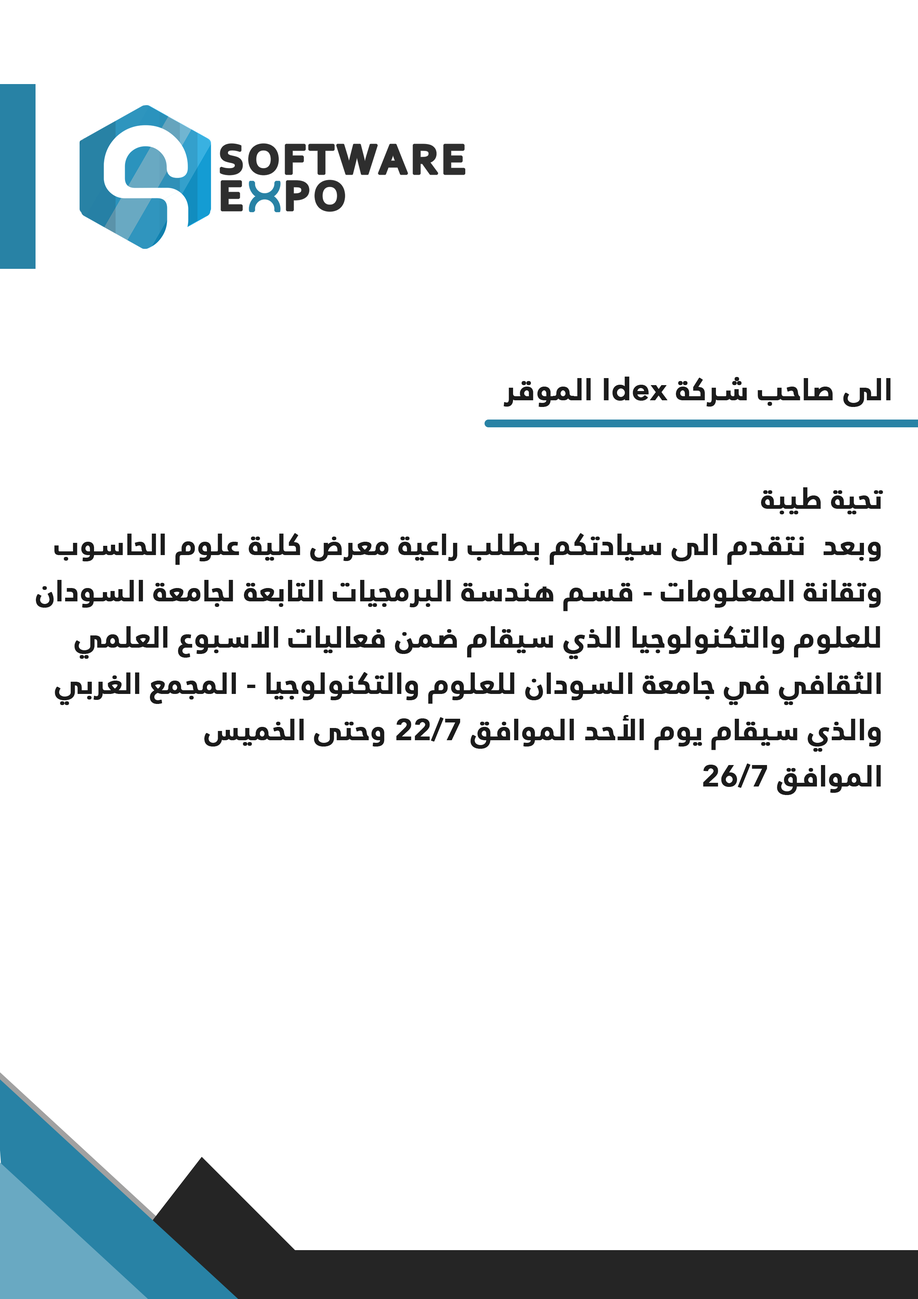
<style>
.page{position:relative;width:918px;height:1299px;background:#ffffff}
.page>*{position:absolute;margin:0}
.t1{font:30.9px "AJannatLT-Bold";color:#1b1b1b;font-weight:bold}
.t2{font:29.7px/46.3px "AJannatLT-Bold";color:#1b1b1b;font-weight:bold}
</style>
<div class="page">
<p class="t1" style="left:504px;top:377px;width:387px;height:30px">الى صاحب شركة Idex الموقر</p>
<p class="t2" style="left:36px;top:487px;width:847px;height:308px">تحية طيبة <br>وبعد  نتقدم الى سيادتكم بطلب راعية معرض كلية علوم الحاسوب<br>وتقانة المعلومات - قسم هندسة البرمجيات التابعة لجامعة السودان<br>للعلوم والتكنولوجيا الذي سيقام ضمن فعاليات الاسبوع العلمي<br>الثقافي في جامعة السودان للعلوم والتكنولوجيا - المجمع الغربي<br>والذي سيقام يوم الأحد الموافق 22/7 وحتى الخميس<br>الموافق 26/7</p>
</div>
